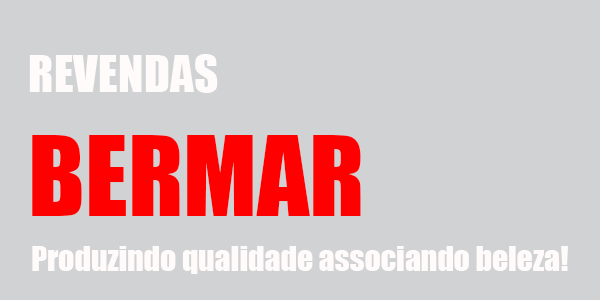
<style>
.page{position:relative;width:600px;height:300px;background:#d1d2d4}
.page>*{position:absolute;margin:0}
.t1{font:47.5px "Impact";color:#fffbfb}
.t2{font:102.9px "Impact";color:#ff0000}
.t3{font:31.6px "Impact";color:#fffbfb}
</style>
<div class="page">
<p class="t1" style="left:29px;top:54px;width:332px;height:162px">REVENDAS<br><span class="t2">BERMAR</span></p>
<p class="t3" style="left:32px;top:246px;width:536px;height:28px">Produzindo qualidade associando beleza!</p>
</div>
